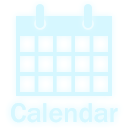
<style>
.page{position:relative;width:128px;height:128px;background:#d6f7ff}
.page>*{position:absolute;margin:0}
.t1{font:28px "FranklinGothic-Medium";color:#d6f7ff}
</style>
<div class="page">
<p class="t1" style="left:11px;top:103px;width:107px;height:20px">Calendar</p>
<p class="t1" style="left:11px;top:103px;width:107px;height:20px">Calendar</p>
</div>
